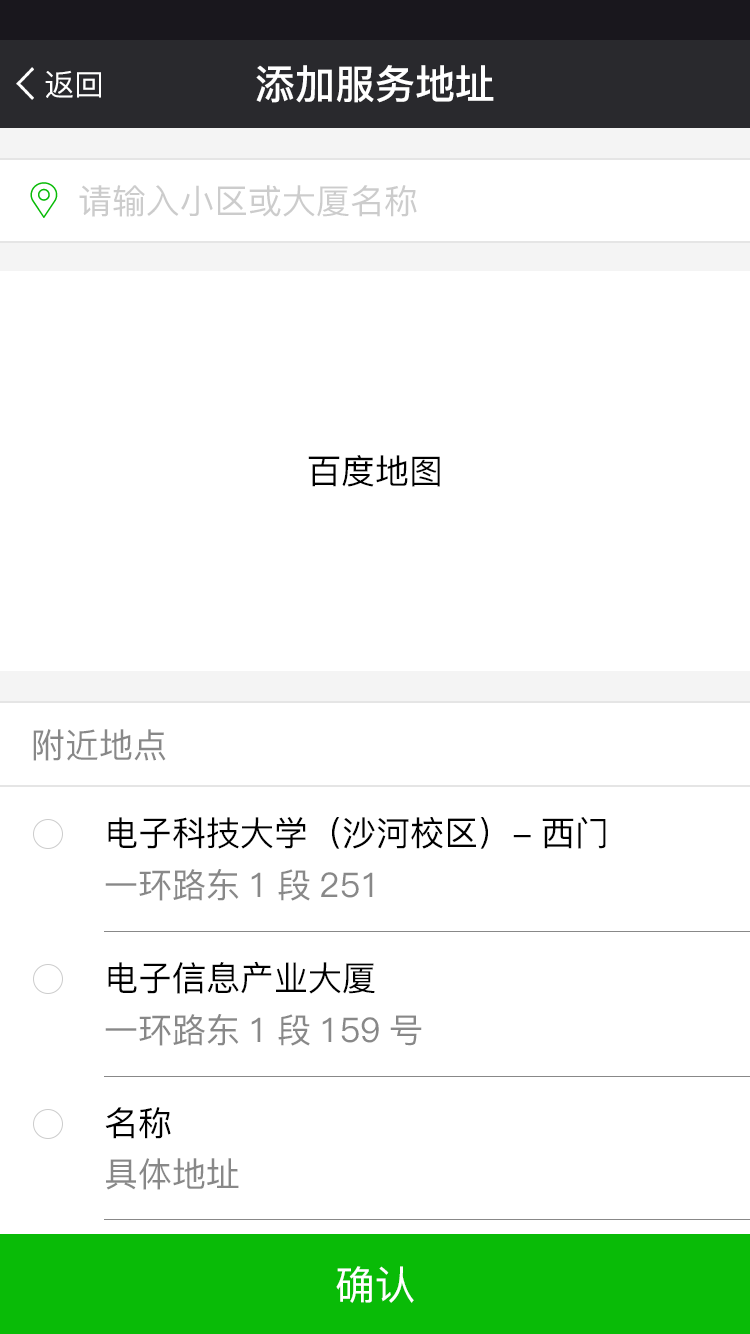
<style>
.page{position:relative;width:750px;height:1334px;background:#ffffff}
.page>*{position:absolute;margin:0}
.t1{font:40px "PingFangSC-Medium";color:#ffffff}
.t2{font:30px "PingFangSC";color:#ffffff}
.t3{font:34px "PingFangSC";color:#cccccc}
.t4{font:34px "PingFangSC";color:#000000}
.t5{font:34px "PingFangSC";color:#888888}
.t6{font:40px "PingFangSC";color:#ffffff}
</style>
<div class="page">
<p class="t1" style="left:256px;top:65px;width:238px;height:38px">添加服务地址</p>
<p class="t2" style="left:45px;top:70px;width:56px;height:28px">返回</p>
<p class="t3" style="left:79px;top:185px;width:338px;height:32px">请输入小区或大厦名称</p>
<p class="t4" style="left:308px;top:455px;width:132px;height:32px">百度地图</p>
<p class="t5" style="left:33px;top:729px;width:133px;height:32px">附近地点</p>
<p class="t4" style="left:108px;top:817px;width:498px;height:32px">电子科技大学（沙河校区）-西门</p>
<p class="t5" style="left:105px;top:869px;width:268px;height:32px">一环路东1段251</p>
<p class="t4" style="left:108px;top:961px;width:267px;height:33px">电子信息产业大厦</p>
<p class="t5" style="left:105px;top:1014px;width:317px;height:32px">一环路东1段159号</p>
<p class="t4" style="left:105px;top:1107px;width:66px;height:32px">名称</p>
<p class="t5" style="left:106px;top:1158px;width:133px;height:32px">具体地址</p>
<p class="t6" style="left:336px;top:1266px;width:78px;height:37px">确认</p>
</div>
